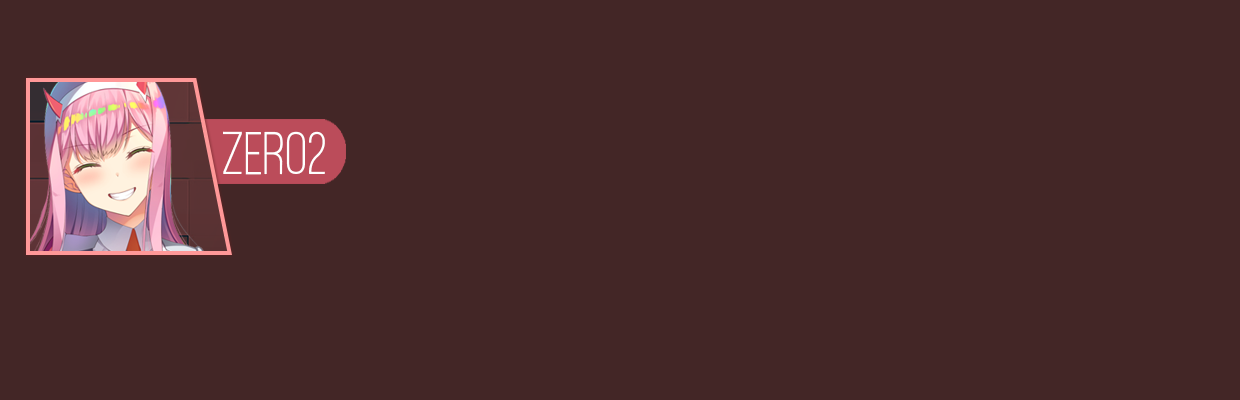
<style>
.page{position:relative;width:1240px;height:400px;background:#432626}
.page>*{position:absolute;margin:0}
.t1{font:62.2px "OstrichSans-Medium";color:#ffffff}
</style>
<div class="page">
<p class="t1" style="left:223px;top:131px;width:102px;height:44px">ZERO2</p>
</div>
